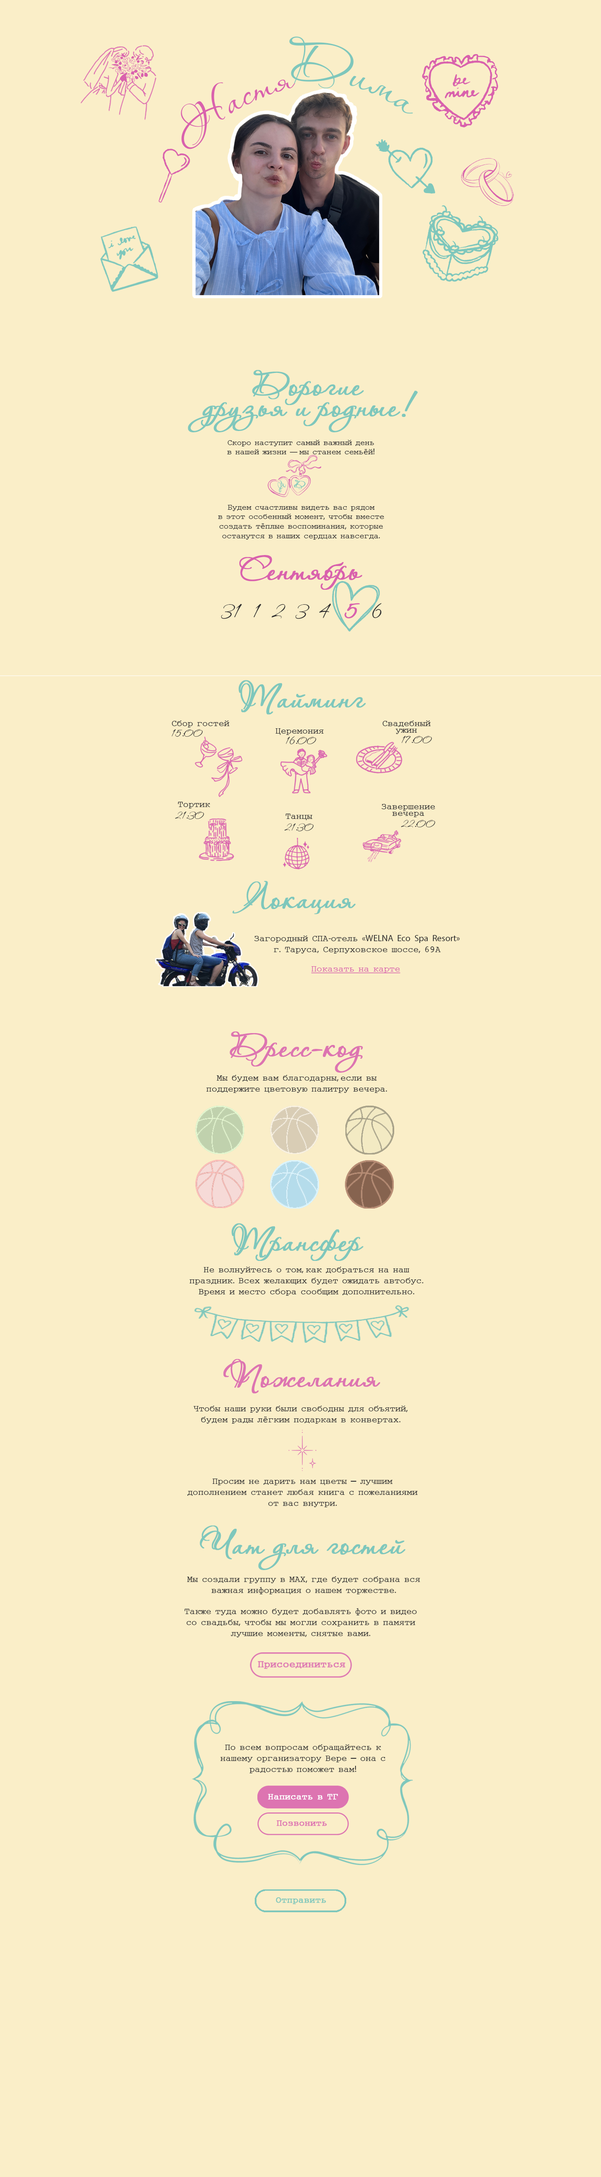
<style>
.page{position:relative;width:601px;height:2177px;background:#faeec8}
.page>*{position:absolute;margin:0}
.t1{font:31.7px "BodegaScript";color:#7ec7bc}
.t2{font:31.7px "BodegaScript";color:#d961ad}
.t3{font:30.3px/21.1px "BodegaScript";color:#7ec7bc;font-weight:bold}
.t4{font:7.9px "Mltsvfont";color:#2f2e2f}
.t5{font:7.9px "MyriadPro-Regular";color:#2f2e2f}
.t6{font:8.6px "BodegaScript";color:#7ec7bc;font-weight:bold}
.t7{font:9px "BodegaScript";color:#7ec7bc;font-weight:bold}
.t8{font:30.3px "BodegaScript";color:#d961ad;font-weight:bold}
.t9{font:21.1px "BodegaScript";color:#2f2e2f}
.t10{font:24.2px "BodegaScript";color:#d961ad;font-weight:bold}
.t11{font:30.3px "BodegaScript";color:#7ec7bc;font-weight:bold}
.t12{font:9px "Mltsvfont";color:#2f2e2f}
.t13{font:9px/6.7px "Mltsvfont";color:#2f2e2f}
.t14{font:11.2px "BodegaScript";color:#2f2e2f}
.t15{font:9px "MyriadPro-Regular";color:#2f2e2f}
.t16{font:9px "Mltsvfont";color:#d961ad;text-decoration:underline}
.t17{font:30.3px "BodegaScript";color:#dd74b1;font-weight:bold}
.t18{font:9px "Mltsvfont";color:#7ec7bc;font-weight:bold}
</style>
<div class="page">
<p class="t1" style="left:289px;top:37px;width:124px;height:77px;rotate:49deg">Дима</p>
<p class="t2" style="left:181px;top:80px;width:114px;height:69px;rotate:-12deg">Настя</p>
<p class="t3" style="left:188px;top:370px;width:230px;height:62px;text-align:center">Дорогие <br>друзья и родные!</p>
<p class="t4" style="left:227px;top:440px;width:147px;height:15px;text-align:center">Скоро наступит самый важный день <br>в нашей жизни <span class="t5">— </span>мы станем семьёй<span class="t5">!</span></p>
<p class="t6" style="left:278px;top:480px;width:8px;height:14px;rotate:-40deg">А</p>
<p class="t7" style="left:294px;top:480px;width:12px;height:9px;rotate:7deg">Д</p>
<p class="t4" style="left:218px;top:505px;width:166px;height:35px;text-align:center">Будем счастливы видеть вас рядом <br>в этот особенный момент<span class="t5">,</span> чтобы вместе создать тёплые воспоминания<span class="t5">,</span> которые останутся в наших сердцах навсегда<span class="t5">.</span></p>
<p class="t8" style="left:239px;top:555px;width:123px;height:35px">Сентябрь</p>
<p class="t9" style="left:221px;top:603px;width:160px;height:16px">31  1  2  3  4       6</p>
<p class="t10" style="left:344px;top:603px;width:16px;height:15px">5</p>
<p class="t11" style="left:238px;top:680px;width:128px;height:35px">Тайминг</p>
<p class="t12" style="left:172px;top:720px;width:58px;height:7px">Сбор гостей</p>
<p class="t13" style="left:382px;top:720px;width:49px;height:14px;text-align:center">Свадебный<br>ужин</p>
<p class="t14" style="left:172px;top:729px;width:31px;height:8px">15:00</p>
<p class="t12" style="left:275px;top:728px;width:49px;height:7px">Церемония</p>
<p class="t14" style="left:286px;top:736px;width:30px;height:9px">16:00</p>
<p class="t14" style="left:402px;top:736px;width:30px;height:8px">17:00</p>
<p class="t12" style="left:178px;top:802px;width:32px;height:6px">Тортик</p>
<p class="t13" style="left:381px;top:804px;width:54px;height:13px;text-align:center">Завершение<br>вечера</p>
<p class="t14" style="left:175px;top:811px;width:29px;height:9px">21:30</p>
<p class="t12" style="left:285px;top:814px;width:27px;height:6px">Танцы</p>
<p class="t14" style="left:401px;top:820px;width:34px;height:8px">22:00</p>
<p class="t14" style="left:284px;top:823px;width:30px;height:9px">21:30</p>
<p class="t11" style="left:232px;top:881px;width:123px;height:33px">Локация</p>
<p class="t15" style="left:254px;top:935px;width:206px;height:19px;text-align:center"><span class="t12"><br>Загородный СПА</span>-<span class="t12">отель </span>«WELNA Eco Spa Resort»<span class="t12"><br>г</span>.<span class="t12"> Таруса</span>,<span class="t12"> Серпуховское шоссе</span>,<span class="t12"> 69А</span></p>
<p class="t16" style="left:311px;top:966px;width:89px;height:7px">Показать на карте</p>
<p class="t17" style="left:230px;top:1031px;width:133px;height:42px">Дресс-код</p>
<p class="t12" style="left:206px;top:1075px;width:181px;height:18px;text-align:center">Мы будем вам благодарны<span class="t15">, </span>если вы поддержите цветовую палитру вечера<span class="t15">.</span></p>
<p class="t11" style="left:231px;top:1223px;width:132px;height:38px">Трансфер</p>
<p class="t12" style="left:189px;top:1267px;width:234px;height:29px;text-align:center">Не волнуйтесь о том<span class="t15">, </span>как добраться на наш праздник<span class="t15">.</span> Всех желающих будет ожидать автобус<span class="t15">.</span> Время и место сбора сообщим дополнительно<span class="t15">.</span></p>
<p class="t17" style="left:223px;top:1359px;width:157px;height:35px">Пожелания</p>
<p class="t12" style="left:194px;top:1406px;width:214px;height:18px;text-align:center">Чтобы наши руки были свободны для объятий<span class="t15">,</span> будем рады лёгким подаркам в конвертах<span class="t15">.</span></p>
<p class="t12" style="left:187px;top:1479px;width:230px;height:28px;text-align:center">Просим не дарить нам цветы — лучшим дополнением станет любая книга с пожеланиями от вас внутри<span class="t15">.</span></p>
<p class="t11" style="left:200px;top:1525px;width:206px;height:45px">Чат для гостей</p>
<p class="t12" style="left:187px;top:1576px;width:233px;height:18px;text-align:center">Мы создали группу в МАХ<span class="t15">,</span> где будет собрана вся важная информация о нашем торжестве<span class="t15">.</span></p>
<p class="t12" style="left:184px;top:1608px;width:233px;height:29px;text-align:center">Также туда можно будет добавлять фото и видео со свадьбы<span class="t15">,</span> чтобы мы могли сохранить в памяти лучшие моменты<span class="t15">,</span> снятые вами<span class="t15">.</span></p>
<p class="t12" style="left:220px;top:1744px;width:165px;height:29px;text-align:center">По всем вопросам обращайтесь к нашему организатору Вере — она с радостью поможет вам<span class="t15">!</span></p>
<p class="t18" style="left:276px;top:1897px;width:50px;height:7px">Отправить</p>
</div>
